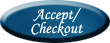
<style>
.page{position:relative;width:110px;height:43px}
.page>*{position:absolute;margin:0}
.t1{font:16px/14px "MonotypeCorsiva";color:#ffffff}
</style>
<div class="page">
<p class="t1" style="left:31px;top:8px;width:52px;height:29px;text-align:center">Accept/<br>Checkout</p>
</div>
